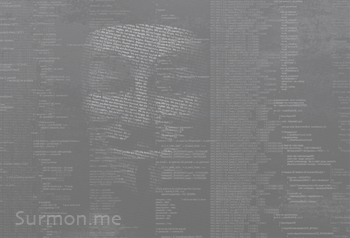
<style>
.page{position:relative;width:350px;height:238px}
.page>*{position:absolute;margin:0}
.t1{font:20.8px "Skia-Regular";color:#939393}
</style>
<div class="page">
<p class="t1" style="left:15px;top:211px;width:106px;height:14px">Surmon.me</p>
</div>
